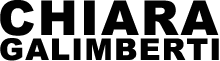
<style>
.page{position:relative;width:220px;height:61px;background:#010101}
.page>*{position:absolute;margin:0}
.t1{font:48px "Arial-Black";letter-spacing:0.05em;color:#010101}
.t2{font:30px "Arial-Black";letter-spacing:0.045em;color:#010101}
</style>
<div class="page">
<p class="t1" style="left:0px;top:0px;width:219px;height:36px">CHIARA</p>
<p class="t2" style="left:0px;top:38px;width:219px;height:23px">GALIMBERTI</p>
</div>
